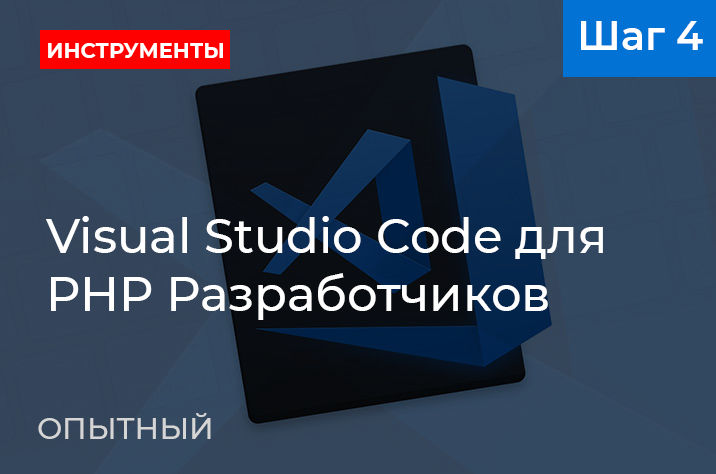
<style>
.page{position:relative;width:716px;height:474px}
.page>*{position:absolute;margin:0}
.t1{font:40px "Montserrat-SemiBold";color:#ffffff}
.t2{font:22px "Montserrat-Bold";color:#ffffff;scale:0.95 1}
.t3{font:48px "Montserrat-Medium";color:#ffffff}
.t4{font:30px "Montserrat-Medium";color:#d5d5d5}
</style>
<div class="page">
<p class="t1" style="left:581px;top:21px;width:122px;height:29px">Шаг 4</p>
<p class="t2" style="left:48px;top:43px;width:175px;height:15px">ИНСТРУМЕНТЫ</p>
<p class="t3" style="left:46px;top:216px;width:557px;height:104px">Visual Studio Code для<br>PHP Разработчиков</p>
<p class="t4" style="left:38px;top:413px;width:173px;height:26px">ОПЫТНЫЙ</p>
</div>
